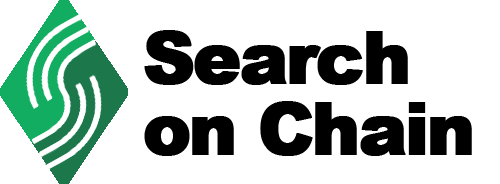
<style>
.page{position:relative;width:500px;height:184px;background:#ffffff}
.page>*{position:absolute;margin:0}
.t1{font:72px/71px "Arial-Black";letter-spacing:-0.05em;color:#000000;font-weight:bold}
</style>
<div class="page">
<p class="t1" style="left:144px;top:30px;width:328px;height:126px">Search<br>on Chain</p>
</div>
